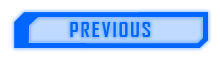
<style>
.page{position:relative;width:220px;height:60px;background:#ffffff}
.page>*{position:absolute;margin:0}
.t1{font:20px "AgencyFB-Bold";letter-spacing:0.1em;color:#0066ff}
</style>
<div class="page">
<p class="t1" style="left:70px;top:22px;width:81px;height:15px">PREVIOUS</p>
</div>
